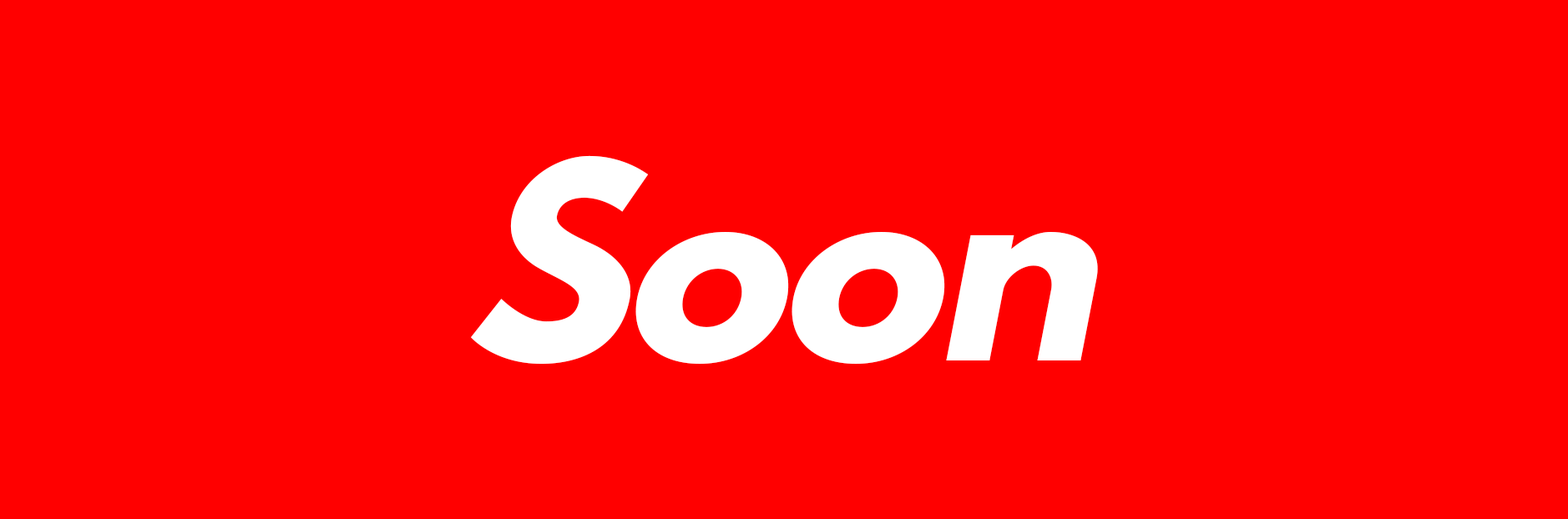
<style>
.page{position:relative;width:1568px;height:519px;background:#ff0000}
.page>*{position:absolute;margin:0}
.t1{font:243.5px "LeagueSpartan-Bold";letter-spacing:-0.02em;color:#ffffff;font-style:italic}
</style>
<div class="page">
<p class="t1" style="left:471px;top:155px;width:627px;height:209px">Soon</p>
</div>
